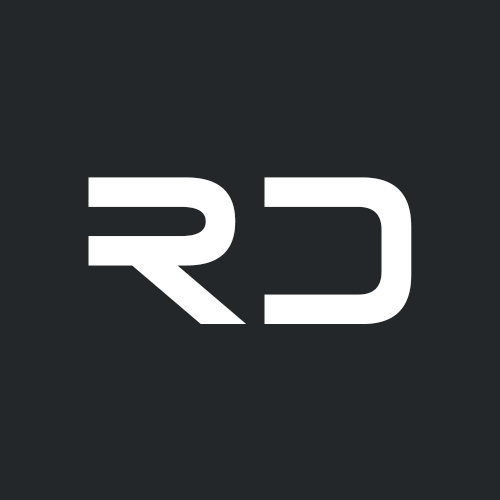
<style>
.page{position:relative;width:500px;height:500px;background:#23272a}
.page>*{position:absolute;margin:0}
.t1{font:200px "ElementalEnd";color:#ffffff}
</style>
<div class="page">
<p class="t1" style="left:88px;top:177px;width:324px;height:147px">RD</p>
</div>
